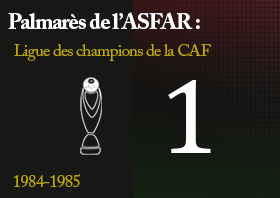
<style>
.page{position:relative;width:280px;height:198px;background:#171715}
.page>*{position:absolute;margin:0}
.t1{font:22.2px "ACaslonPro-Bold";letter-spacing:-0.04em;color:#ffffff}
.t2{font:16.7px "ACaslonPro-Regular";letter-spacing:-0.04em;color:#c0a808}
.t3{font:107.8px "CambriaMath";letter-spacing:-0.04em;color:#ffffff}
</style>
<div class="page">
<p class="t1" style="left:8px;top:12px;width:192px;height:17px">Palmarès de l’ASFAR :</p>
<p class="t2" style="left:14px;top:44px;width:197px;height:17px">Ligue des champions de la CAF</p>
<p class="t3" style="left:168px;top:80px;width:43px;height:73px">1</p>
<p class="t2" style="left:13px;top:174px;width:67px;height:13px">1984-1985</p>
</div>
